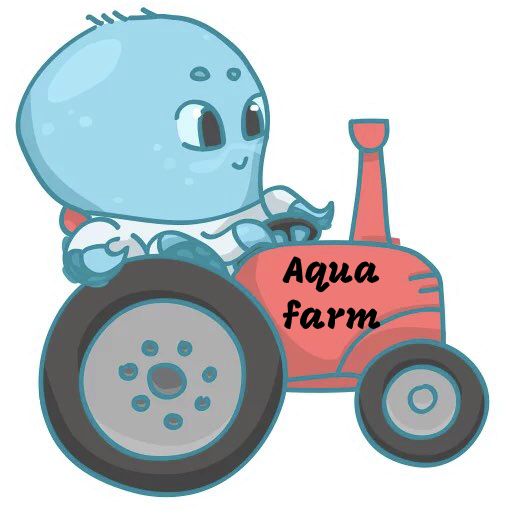
<style>
.page{position:relative;width:512px;height:512px;background:#ffffff}
.page>*{position:absolute;margin:0}
.t1{font:38px "Mogra-Regular";color:#000000}
</style>
<div class="page">
<p class="t1" style="left:282px;top:256px;width:99px;height:73px;text-align:center">Aqua<br>farm</p>
</div>
